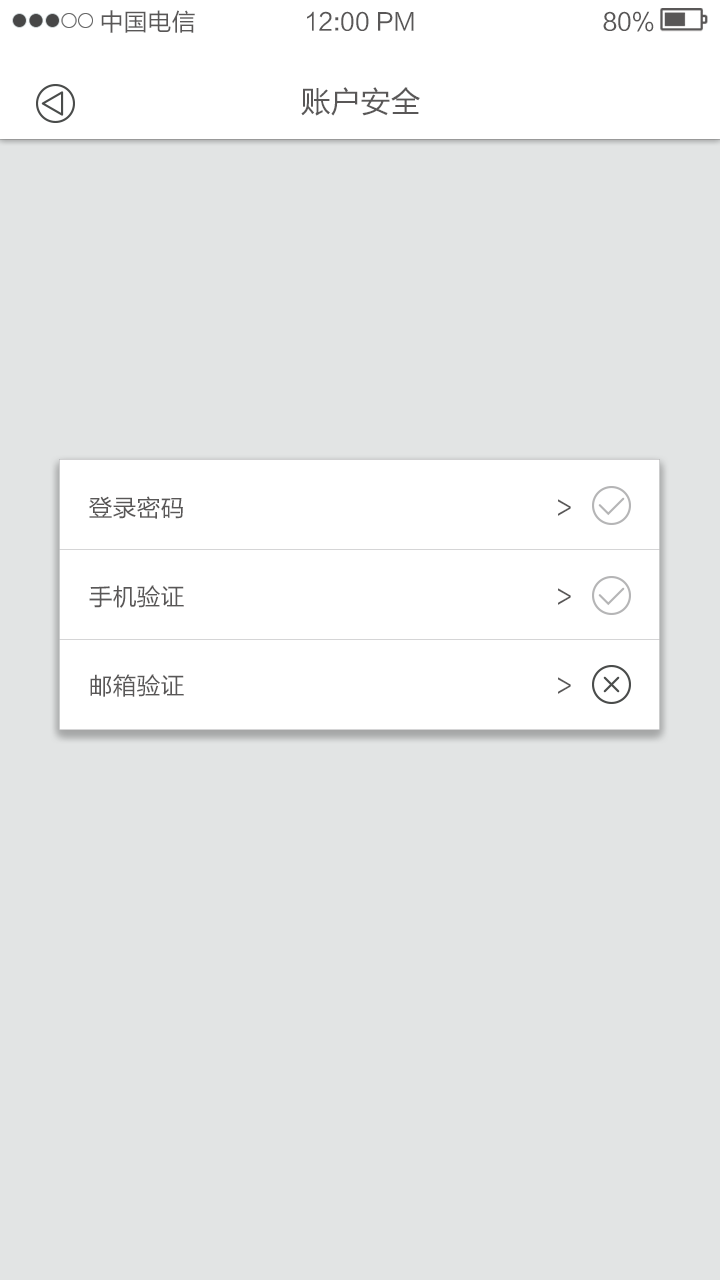
<style>
.page{position:relative;width:720px;height:1280px;background:#e2e4e4}
.page>*{position:absolute;margin:0}
.t1{font:24px "FZLTHK--GBK1-0";color:#595757}
.t2{font:30px "FZLTHK--GBK1-0";color:#595757}
.t3{font:24px/89px "FZLTHK--GBK1-0";color:#595757}
</style>
<div class="page">
<p class="t1" style="left:101px;top:10px;width:94px;height:23px">中国电信</p>
<p class="t1" style="left:307px;top:11px;width:107px;height:20px">12:00 PM</p>
<p class="t1" style="left:603px;top:11px;width:51px;height:21px">80%</p>
<p class="t2" style="left:301px;top:87px;width:119px;height:29px">账户安全</p>
<p class="t3" style="left:89px;top:496px;width:482px;height:201px">登录密码           &gt;<br>手机验证           &gt;<br>邮箱验证           &gt;</p>
</div>
